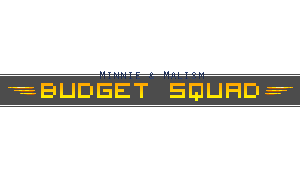
<style>
.page{position:relative;width:300px;height:180px;background:#ffffff}
.page>*{position:absolute;margin:0}
.t1{font:12px "OratorStd";color:#202f53}
.t2{font:29.3px "VisitorTT1BRK";text-transform:uppercase}
</style>
<div class="page">
<p class="t1" style="left:100px;top:71px;width:104px;height:8px">Minnie &amp; Malism</p>
<p class="t2" style="left:41px;top:83px;width:218px;height:18px">Budget squaD</p>
</div>
